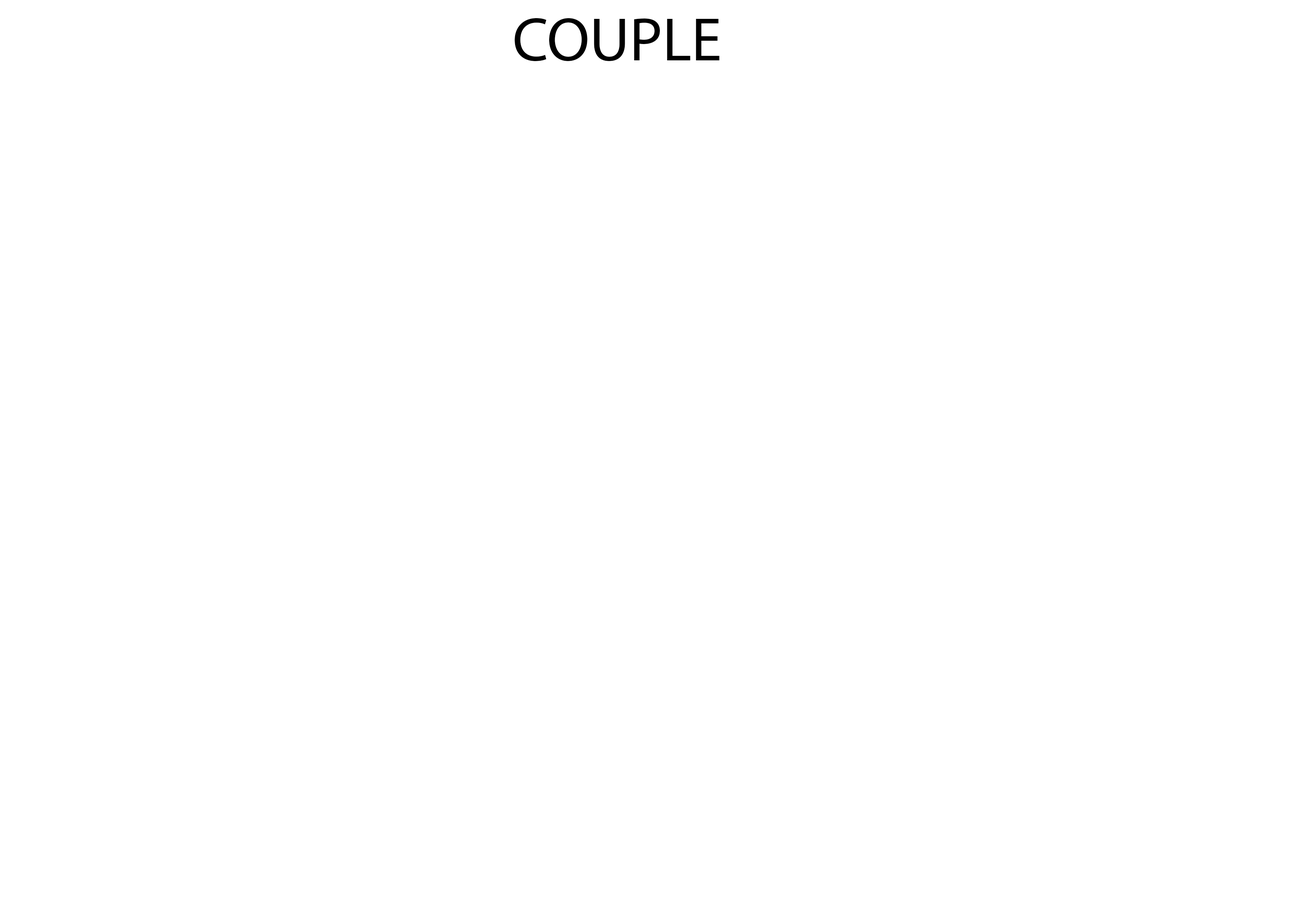
<style>
.page{position:relative;width:1299px;height:918px;background:#ffffff}
.page>*{position:absolute;margin:0}
.t1{font:61.7px "MyriadPro-Regular";color:#000000}
</style>
<div class="page">
<p class="t1" style="left:515px;top:18px;width:204px;height:43px">COUPLE</p>
</div>
